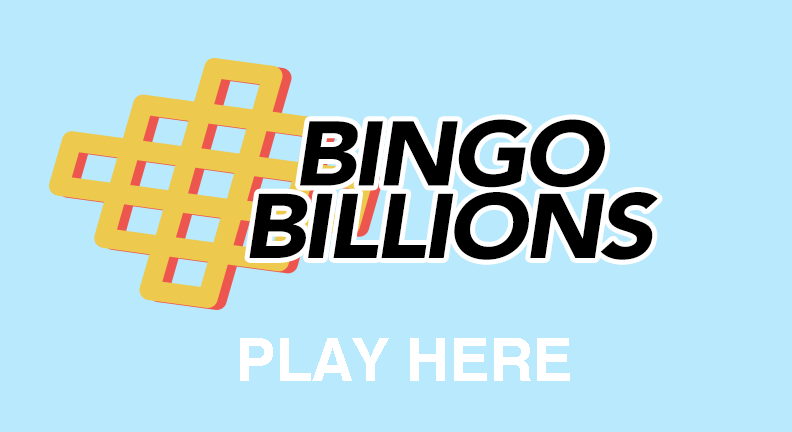
<style>
.page{position:relative;width:792px;height:432px;background:#b8e9fd}
.page>*{position:absolute;margin:0}
.t1{font:90.8px/72.5px "Avenir-BlackOblique";letter-spacing:-0.04em;color:#000000;scale:1.06 1}
.t2{font:60px "Helvetica-Bold";color:#ffffff}
</style>
<div class="page">
<p class="t1" style="left:249px;top:119px;width:409px;height:141px;text-align:center">BINGO<br>BILLIONS</p>
<p class="t2" style="left:240px;top:338px;width:330px;height:43px">PLAY HERE</p>
</div>
